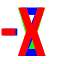
<style>
.page{position:relative;width:64px;height:64px;background:#ffffff}
.page>*{position:absolute;margin:0}
.t1{font:68.8px "BebasNeueBold";color:#ff0000}
.t2{font:68.8px "BebasNeueBold";color:#0000ff}
.t3{font:68.8px "BebasNeueBold";color:#00ff00}
</style>
<div class="page">
<p class="t1" style="left:1px;top:7px;width:45px;height:49px">-X</p>
<p class="t2" style="left:3px;top:7px;width:40px;height:49px">-z</p>
<p class="t3" style="left:18px;top:7px;width:27px;height:49px">y</p>
<p class="t1" style="left:18px;top:7px;width:28px;height:49px">x</p>
<p class="t2" style="left:20px;top:7px;width:23px;height:49px">z</p>
</div>
